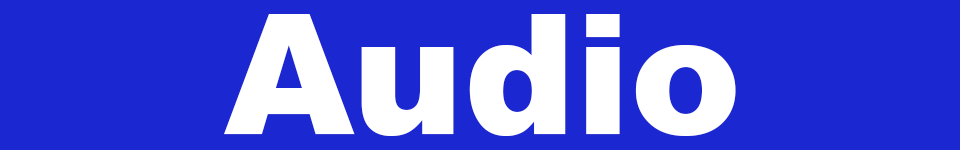
<style>
.page{position:relative;width:960px;height:150px;background:#1b27d0}
.page>*{position:absolute;margin:0}
.t1{font:166.7px "Arial-Black";color:#ffffff}
</style>
<div class="page">
<p class="t1" style="left:224px;top:14px;width:512px;height:122px">Audio</p>
</div>
